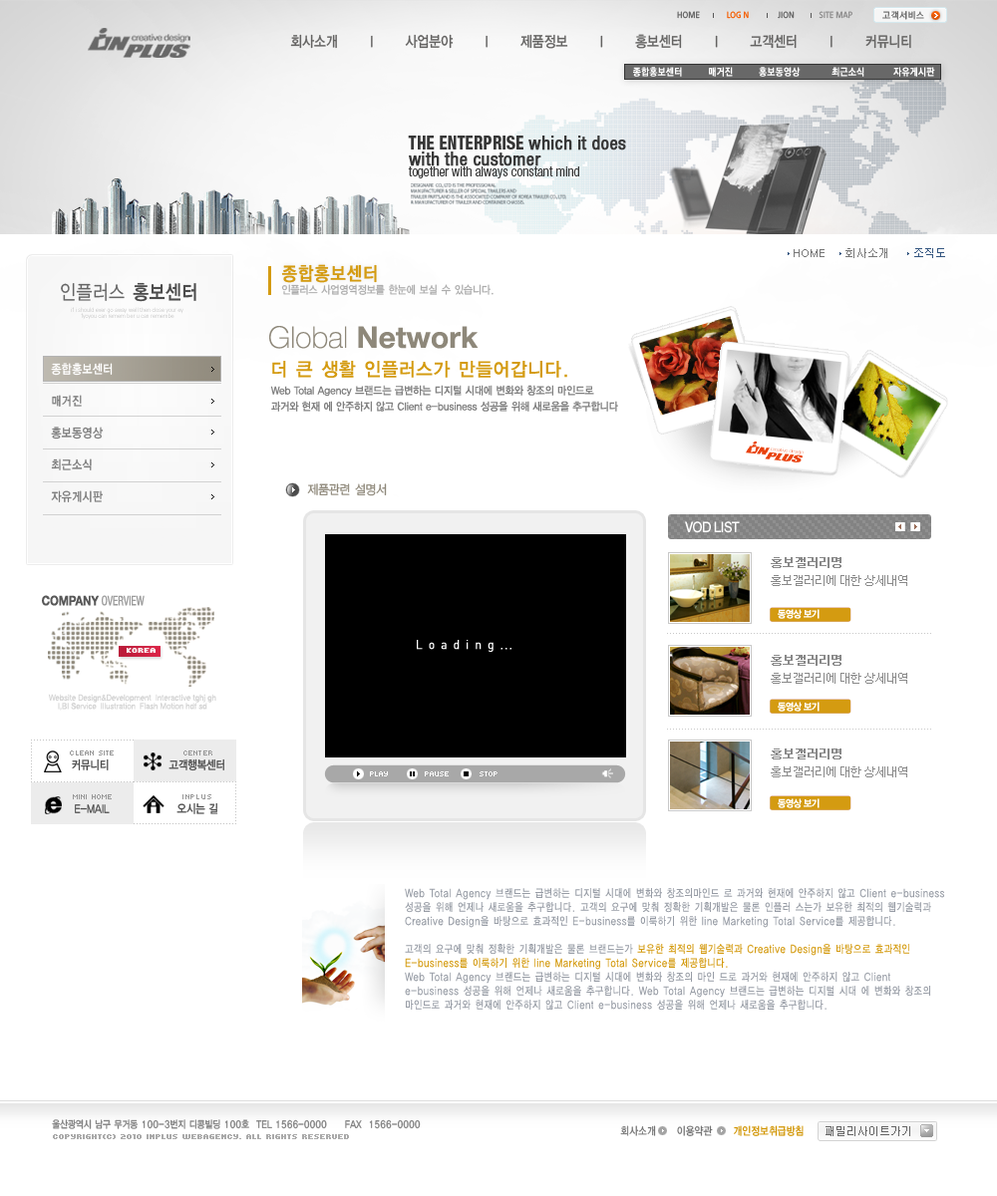
<style>
.page{position:relative;width:997px;height:1196px;background:#ffffff}
.page>*{position:absolute;margin:0}
.t1{font:9px "Moebius";color:#8d8c8c;text-transform:uppercase;scale:0.9 1}
.t2{font:9px "Moebius";color:#636363;text-transform:uppercase;scale:0.9 1}
.t3{font:9px "Moebius";color:#f55d00;text-transform:uppercase;scale:0.9 1}
.t4{font:9px "YGO530";letter-spacing:0.04em;color:#656565}
.t5{font:15px "YGO33";letter-spacing:-0.075em;color:#646362;scale:0.85 1}
.t6{font:10px "YGO540";letter-spacing:0.02em;color:#ffffff;scale:0.9 1}
.t7{font:18.5px/16.4px "HelveticaNeue-Condensed";color:#373737;font-weight:bold}
.t8{font:18.5px/16.4px "HelveticaNeue-HeavyCond";color:#373737;text-transform:uppercase;scale:0.9 1}
.t9{font:13.7px "HelveticaNeue-LightCond";color:#373737}
.t10{font:11px "Dotum";color:#777777}
.t11{font:11px "Dotum";color:#345680}
.t12{font:18.8px "YGO33";letter-spacing:-0.025em;color:#d49b11;font-weight:bold;scale:0.86 1}
.t13{font:19.9px "YGO32";letter-spacing:-0.045em;color:#656565;text-transform:uppercase;scale:0.86 1}
.t14{font:19.9px "YGO34";letter-spacing:-0.045em;color:#4c4c4c;text-transform:uppercase;scale:0.86 1}
.t15{font:11px "YGO33";letter-spacing:-0.09em;color:#adadad;scale:0.9 1}
.t16{font:6px/6px "Univers-Light";scale:0.9 1}
.t17{font:29.9px "HelveticaNeue-Bold";color:#8e887a}
.t18{font:29.9px "HelveticaNeue-Thin";color:#8e887a}
.t19{font:12.6px/31.9px "YGO33";letter-spacing:-0.04em;color:#7c7c7c;scale:0.86 1}
.t20{font:12.6px/31.9px "YGO33";letter-spacing:-0.04em;color:#ffffff;scale:0.86 1}
.t21{font:18.8px "YGO33";letter-spacing:-0.04em;color:#d49b11;scale:0.95 1}
.t22{font:11px/15.9px "YDIYGO330";color:#808080;scale:0.9 1}
.t23{font:13px "YGO32";letter-spacing:-0.09em;color:#8e887a;scale:0.9 1}
.t24{font:14.7px "HelveticaNeue-Medium";letter-spacing:-0.05em;color:#ffffff;scale:0.9 1}
.t25{font:12px/17.9px "YDIWebDotum";color:#898989}
.t26{font:12px/17.9px "YDIWebDotum";color:#898989;font-weight:bold}
.t27{font:13.1px "HelveticaNeue-Condensed";color:#9c9c9c;scale:0.85 1}
.t28{font:13.1px "HelveticaNeue-Bold";color:#585858;scale:0.85 1}
.t29{font:10px "YDIYGO340";letter-spacing:-0.05em;color:#ffffff;scale:0.9 1}
.t30{font:12.6px "Dinreg";letter-spacing:0.5em;color:#ffffff;font-weight:bold;scale:0.9 1}
.t31{font:12.6px "Dinreg";letter-spacing:0.1em;color:#ffffff;font-weight:bold;scale:0.9 1}
.t32{font:8.1px "Kroeger0555";color:#ffffff;font-weight:bold}
.t33{font:8.4px/8.4px "HelveticaNeue-Roman";color:#d4d4d4;scale:0.9 1}
.t34{font:8px "Kroeger0556";letter-spacing:-0.1em;color:#989898}
.t35{font:12px "YDIYGO330";color:#4c4c4c;scale:0.85 1}
.t36{font:8px "Kroeger0556";letter-spacing:-0.1em;color:#989898;text-transform:uppercase}
.t37{font:8px "Kroeger0555";color:#ffffff}
.t38{font:8px "Kroeger0556";letter-spacing:-0.04em;color:#989898}
.t39{font:12px "YDIYGO330";color:#4c4c4c;text-transform:uppercase;scale:0.85 1}
.t40{font:11px/14px "YGO32";color:#989da6;scale:0.8 1}
.t41{font:11px/14px "YGO32";color:#d49b11;scale:0.8 1}
.t42{font:10px "YGO33";letter-spacing:-0.075em;color:#828282;scale:0.85 1}
.t43{font:11px "YGO33";letter-spacing:-0.05em;color:#757575;scale:0.85 1}
.t44{font:11px "YGO33";letter-spacing:-0.05em;color:#d19400;scale:0.85 1}
.t45{font:11px "Dotum";color:#656565}
.t46{font:8px "Kroeger0555";color:#aaaaaa;font-weight:bold}
</style>
<div class="page">
<p class="t1" style="left:677px;top:11px;width:175px;height:8px"><span class="t2">Home             </span><span class="t3">Log n              </span><span class="t2">Jion</span>            Site map</p>
<p class="t4" style="left:882px;top:11px;width:42px;height:9px">고객서비스</p>
<p class="t5" style="left:290px;top:34px;width:621px;height:15px">회사소개      l      사업분야      l      제품정보      l      홍보센터      l      고객센터      l      커뮤니티</p>
<p class="t6" style="left:633px;top:67px;width:302px;height:10px">종합홍보센터         매거진         홍보동영상           최근소식          자유게시판</p>
<p class="t7" style="left:408px;top:136px;width:218px;height:30px"><span class="t8"><br>The enterprise </span>which it does<br>with the customer</p>
<p class="t9" style="left:408px;top:166px;width:171px;height:12px">together with always constant mind</p>
<p class="t10" style="left:793px;top:248px;width:152px;height:10px">HOME     회사소개      <span class="t11">조직도</span></p>
<p class="t12" style="left:281px;top:264px;width:96px;height:19px">종합홍보센터</p>
<p class="t13" style="left:61px;top:282px;width:135px;height:20px">인플러스 <span class="t14">홍보센터</span></p>
<p class="t15" style="left:281px;top:284px;width:212px;height:11px">인플러스 사업영역정보를 한눈에 보실 수 있습니다.</p>
<p class="t16" style="left:71px;top:307px;width:112px;height:13px;text-align:center">if i should ever go away well then close your ey<br>fyoyou can remem ber u can remembe</p>
<p class="t17" style="left:269px;top:326px;width:209px;height:23px"><span class="t18">Global </span>Network</p>
<p class="t19" style="left:51px;top:363px;width:62px;height:139px"><span class="t20">종합홍보센터<br></span>매거진<br>홍보동영상<br>최근소식<br>자유게시판</p>
<p class="t21" style="left:272px;top:360px;width:295px;height:18px">더 큰 생활 인플러스가 만들어갑니다.</p>
<p class="t22" style="left:270px;top:385px;width:348px;height:27px">Web Total Agency 브랜드는 급변하는 디지털 시대에 변화와 창조의 마인드로 <br>과거와 현재 에 안주하지 않고 Client e-business 성공을 위해 새로움을 추구합니다</p>
<p class="t23" style="left:307px;top:483px;width:80px;height:13px">제품관련 설명서</p>
<p class="t24" style="left:685px;top:521px;width:55px;height:12px">VOD LIST</p>
<p class="t25" style="left:771px;top:557px;width:136px;height:29px"><span class="t26">홍보갤러리명<br></span>홍보갤러리에 대한 상세내역</p>
<p class="t27" style="left:42px;top:595px;width:103px;height:11px"><span class="t28">COMPANY</span> OVERVIEW</p>
<p class="t29" style="left:778px;top:609px;width:41px;height:10px">동영상 보기</p>
<p class="t30" style="left:417px;top:640px;width:94px;height:12px">Loading<span class="t31">...</span></p>
<p class="t32" style="left:127px;top:648px;width:29px;height:5px">korea</p>
<p class="t25" style="left:771px;top:655px;width:136px;height:29px"><span class="t26">홍보갤러리명<br></span>홍보갤러리에 대한 상세내역</p>
<p class="t33" style="left:48px;top:694px;width:168px;height:17px;text-align:center">Website Design&amp;Development  Interactive tghj gh<br>I,BI Service  Illustration  Flash Motion hdf sd</p>
<p class="t29" style="left:778px;top:702px;width:41px;height:10px">동영상 보기</p>
<p class="t25" style="left:771px;top:749px;width:136px;height:29px"><span class="t26">홍보갤러리명<br></span>홍보갤러리에 대한 상세내역</p>
<p class="t34" style="left:70px;top:751px;width:44px;height:5px">CLEAN SITE</p>
<p class="t35" style="left:72px;top:759px;width:37px;height:12px">커뮤니티</p>
<p class="t35" style="left:168px;top:759px;width:56px;height:13px">고객행복센터</p>
<p class="t36" style="left:183px;top:751px;width:29px;height:5px">center</p>
<p class="t37" style="left:370px;top:772px;width:127px;height:5px">PLAY            pause          stop</p>
<p class="t34" style="left:73px;top:794px;width:39px;height:5px">MINI HOME</p>
<p class="t38" style="left:182px;top:794px;width:29px;height:5px">INPLUS</p>
<p class="t39" style="left:75px;top:804px;width:35px;height:9px">E-mail</p>
<p class="t35" style="left:176px;top:802px;width:42px;height:12px">오시는 길</p>
<p class="t29" style="left:778px;top:798px;width:41px;height:10px">동영상 보기</p>
<p class="t40" style="left:405px;top:888px;width:539px;height:123px">Web Total Agency 브랜드는 급변하는 디지털 시대에 변화와 창조의마인드 로 과거와 현재에 안주하지 않고 Client e-business 성공을 위해 언제나 새로움을 추구합니다. 고객의 요구에 맞춰 정확한 기획개발은 물론 인플러 스는가 보유한 최적의 웹기술력과 Creative Design을 바탕으로 효과적인 E-business를 이룩하기 위한 line Marketing Total Service를 제공합니다.<br><br>고객의 요구에 맞춰 정확한 기획개발은 물론 브랜드는가 <span class="t41">보유한 최적의 웹기술력과 Creative Design을 바탕으로 효과적인 E-business를 이룩하기 위한 line Marketing Total Service를 제공합니다.<br></span>Web Total Agency 브랜드는 급변하는 디지털 시대에 변화와 창조의 마인 드로 과거와 현재에 안주하지 않고 Client e-business 성공을 위해 언제나 새로움을 추구합니다. Web Total Agency 브랜드는 급변하는 디지털 시대 에 변화와 창조의 마인드로 과거와 현재에 안주하지 않고 Client e-business 성공을 위해 언제나 새로움을 추구합니다.</p>
<p class="t42" style="left:52px;top:1119px;width:369px;height:10px">울산광역시 남구 무거동 100-3번지 디콩빌딩 100호  TEL 1566-0000     FAX  1566-0000</p>
<p class="t43" style="left:620px;top:1125px;width:183px;height:11px">회사소개     이용약관    <span class="t44"> 개인정보취급방침</span></p>
<p class="t45" style="left:825px;top:1126px;width:85px;height:10px">패밀리사이트가기</p>
<p class="t46" style="left:53px;top:1134px;width:296px;height:5px">COPYRIGHT(C) 2010 INPLUS WEBAGENCY. ALL RIGHTS RESERVED</p>
</div>
